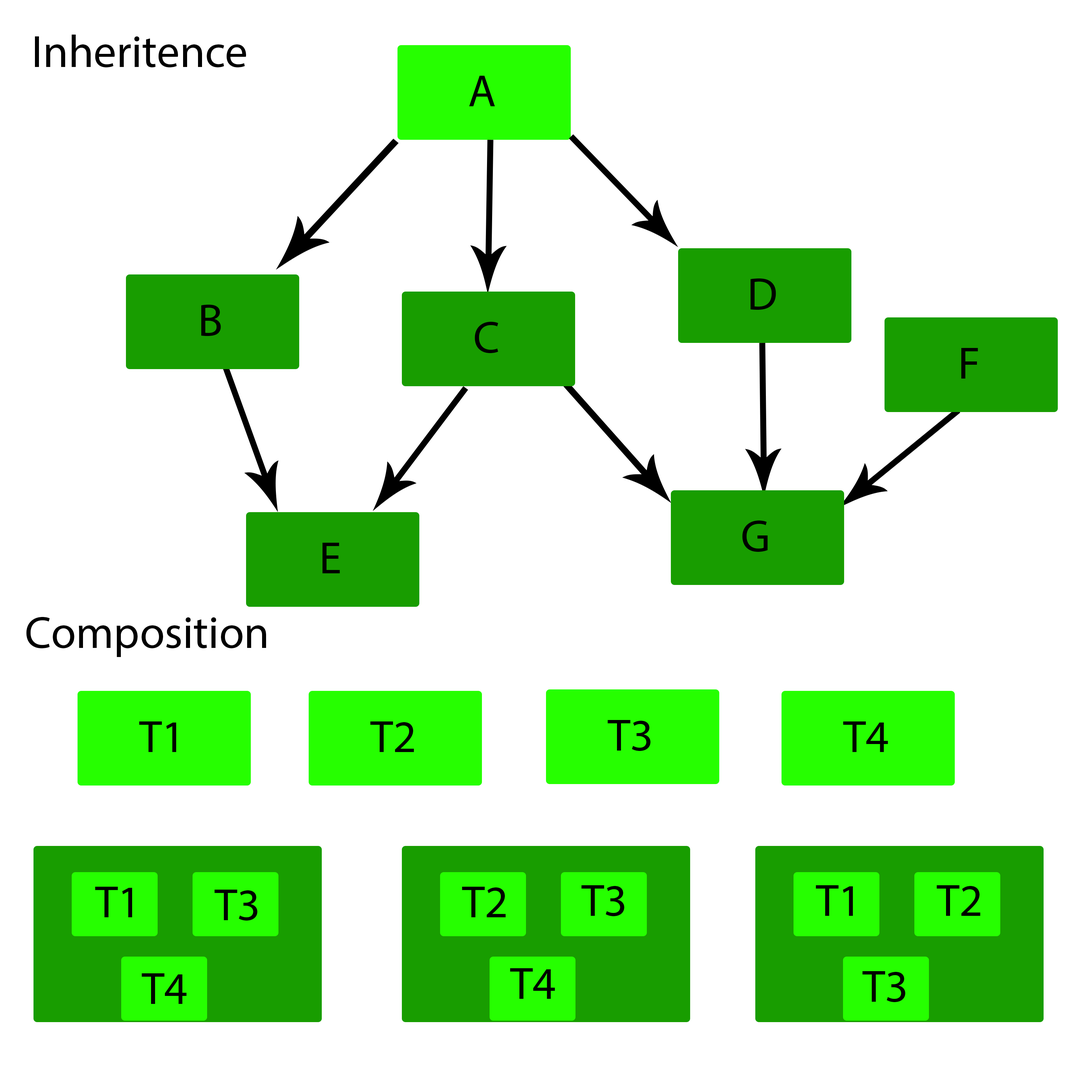
<style>
.page{position:relative;width:1092px;height:1092px;background:#ffffff}
.page>*{position:absolute;margin:0}
.t1{font:45.5px "MyriadPro-Regular";color:#000000}
</style>
<div class="page">
<p class="t1" style="left:35px;top:35px;width:211px;height:33px">Inheritence</p>
<p class="t1" style="left:469px;top:76px;width:26px;height:30px">A</p>
<p class="t1" style="left:751px;top:278px;width:25px;height:32px">D</p>
<p class="t1" style="left:201px;top:304px;width:20px;height:32px">B</p>
<p class="t1" style="left:475px;top:321px;width:23px;height:32px">C</p>
<p class="t1" style="left:961px;top:348px;width:17px;height:31px">F</p>
<p class="t1" style="left:742px;top:520px;width:26px;height:32px">G</p>
<p class="t1" style="left:322px;top:542px;width:18px;height:32px">E</p>
<p class="t1" style="left:26px;top:617px;width:240px;height:40px">Composition</p>
<p class="t1" style="left:139px;top:721px;width:37px;height:31px">T1</p>
<p class="t1" style="left:370px;top:721px;width:44px;height:31px">T2</p>
<p class="t1" style="left:608px;top:720px;width:42px;height:31px">T3</p>
<p class="t1" style="left:843px;top:721px;width:45px;height:31px">T4</p>
<p class="t1" style="left:95px;top:887px;width:37px;height:30px">T1</p>
<p class="t1" style="left:214px;top:890px;width:43px;height:31px">T3</p>
<p class="t1" style="left:462px;top:887px;width:44px;height:31px">T2</p>
<p class="t1" style="left:581px;top:885px;width:43px;height:32px">T3</p>
<p class="t1" style="left:816px;top:885px;width:37px;height:31px">T1</p>
<p class="t1" style="left:937px;top:885px;width:43px;height:31px">T2</p>
<p class="t1" style="left:142px;top:973px;width:45px;height:31px">T4</p>
<p class="t1" style="left:510px;top:968px;width:45px;height:31px">T4</p>
<p class="t1" style="left:862px;top:971px;width:43px;height:31px">T3</p>
</div>
